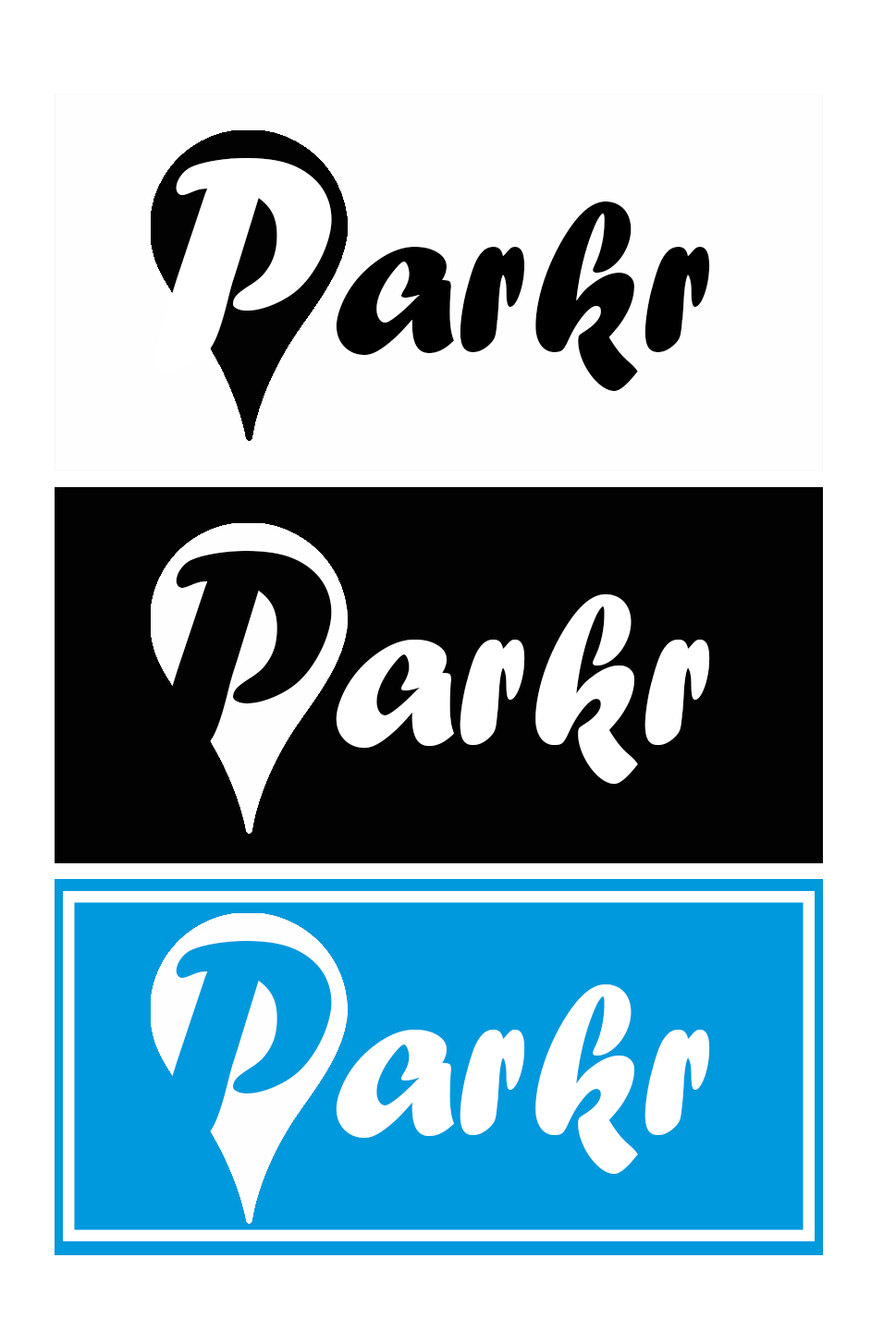
<style>
.page{position:relative;width:896px;height:1331px;background:#ffffff}
.page>*{position:absolute;margin:0}
.t1{font:316.2px "ForteMT";color:#ffffff}
.t2{font:223.7px "ForteMT";color:#000000}
.t3{font:316.2px "ForteMT";color:#020202}
.t4{font:223.7px "ForteMT";color:#ffffff}
.t5{font:316.2px "ForteMT";color:#0099de}
</style>
<div class="page">
<p class="t1" style="left:154px;top:158px;width:178px;height:213px">P</p>
<p class="t2" style="left:336px;top:202px;width:374px;height:189px">arkr</p>
<p class="t3" style="left:154px;top:551px;width:178px;height:213px">P</p>
<p class="t4" style="left:336px;top:594px;width:374px;height:190px">arkr</p>
<p class="t5" style="left:154px;top:941px;width:178px;height:213px">P</p>
<p class="t4" style="left:336px;top:985px;width:374px;height:189px">arkr</p>
</div>
